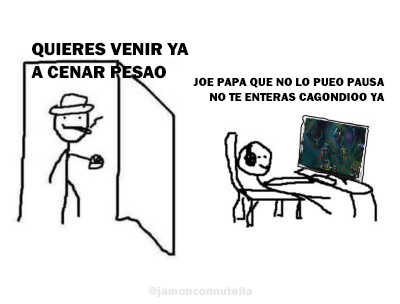
<style>
.page{position:relative;width:400px;height:304px;background:#ffffff}
.page>*{position:absolute;margin:0}
.t1{font:18px "FranklinGothic-Heavy";color:#000000}
.t2{font:12px "FranklinGothic-Heavy";color:#000000}
.t3{font:12px "FranklinGothic-Heavy";color:#e7e7e7}
</style>
<div class="page">
<p class="t1" style="left:31px;top:42px;width:158px;height:37px">QUIERES VENIR YA<br>A CENAR PESAO</p>
<p class="t2" style="left:193px;top:77px;width:192px;height:24px;text-align:right">JOE PAPA QUE NO LO PUEO PAUSA<br>NO TE ENTERAS CAGONDIOO YA</p>
<p class="t3" style="left:148px;top:286px;width:105px;height:11px">@jamonconnutella</p>
</div>
